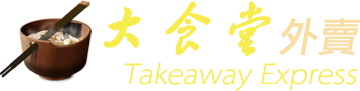
<style>
.page{position:relative;width:360px;height:91px;background:#ffffff}
.page>*{position:absolute;margin:0}
.t1{font:60px "FZHCJW--GB1-0";color:#f7ec4b;font-weight:bold;font-style:italic}
.t2{font:40px "LiGothicMed";color:#f9dda2;font-style:italic}
.t3{font:30px "ZHSRXT--GBK1-0";color:#f7ec4b;font-style:italic}
</style>
<div class="page">
<p class="t1" style="left:104px;top:1px;width:257px;height:56px">大食堂<span class="t2">外賣</span></p>
<p class="t3" style="left:125px;top:62px;width:233px;height:29px">Takeaway Express</p>
</div>
